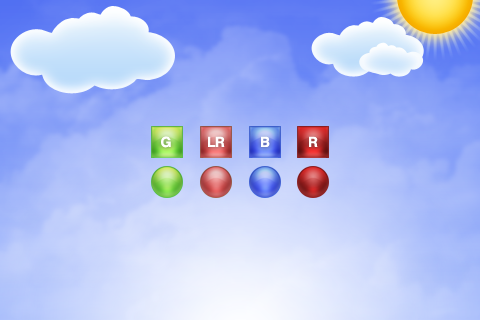
<style>
.page{position:relative;width:480px;height:320px}
.page>*{position:absolute;margin:0}
.t1{font:14px "Helvetica-Bold";letter-spacing:-0.05em;color:#ffffff}
</style>
<div class="page">
<p class="t1" style="left:161px;top:136px;width:10px;height:12px">G</p>
<p class="t1" style="left:208px;top:136px;width:17px;height:11px">LR</p>
<p class="t1" style="left:261px;top:136px;width:9px;height:11px">B</p>
<p class="t1" style="left:309px;top:136px;width:9px;height:11px">R</p>
</div>
